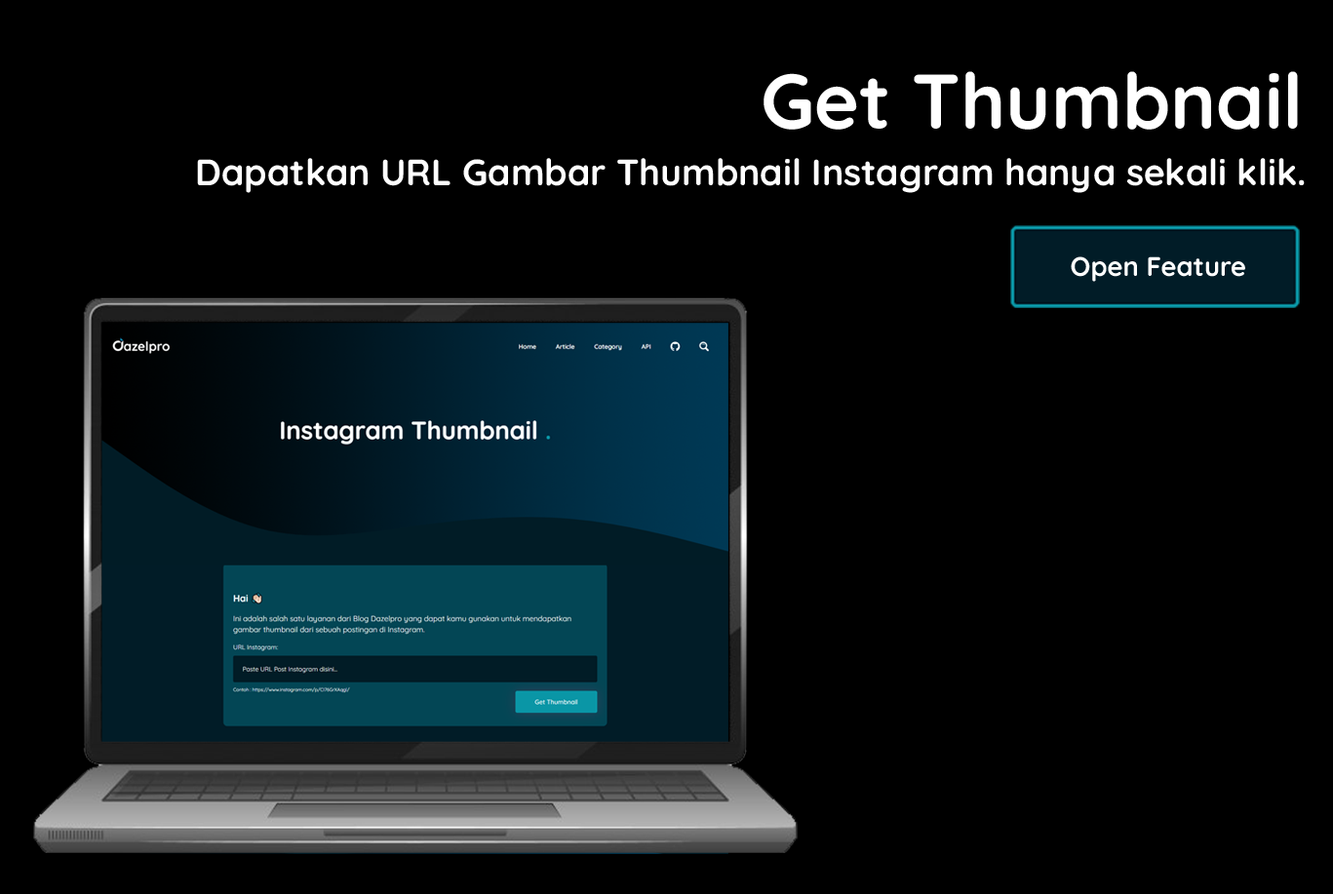
<style>
.page{position:relative;width:1333px;height:894px;background:#000000}
.page>*{position:absolute;margin:0}
.t1{font:77.2px "Quicksand-Bold";color:#ffffff}
.t2{font:36.6px "Quicksand-Bold";color:#ffffff}
.t3{font:26.7px "Quicksand-Bold";color:#ffffff}
</style>
<div class="page">
<p class="t1" style="left:764px;top:71px;width:534px;height:59px">Get Thumbnail</p>
<p class="t2" style="left:197px;top:158px;width:1108px;height:35px">Dapatkan URL Gambar Thumbnail Instagram hanya sekali klik.</p>
<p class="t3" style="left:1071px;top:257px;width:174px;height:25px">Open Feature</p>
</div>
